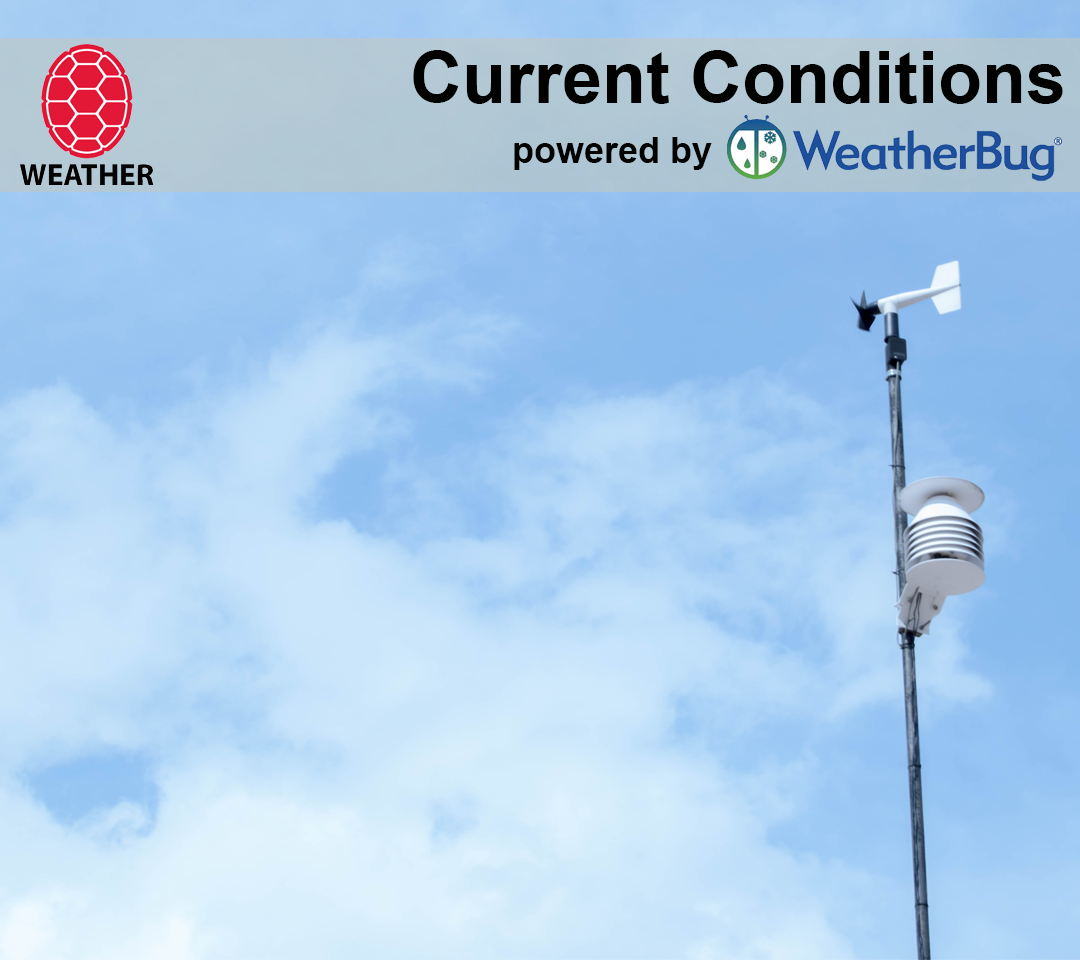
<style>
.page{position:relative;width:1080px;height:960px}
.page>*{position:absolute;margin:0}
.t1{font:72px "Arial-BoldMT";color:#010200}
.t2{font:36px "Arial-BoldMT";color:#010200}
</style>
<div class="page">
<p class="t1" style="left:413px;top:50px;width:650px;height:54px">Current Conditions</p>
<p class="t2" style="left:514px;top:137px;width:198px;height:33px">powered by</p>
</div>
